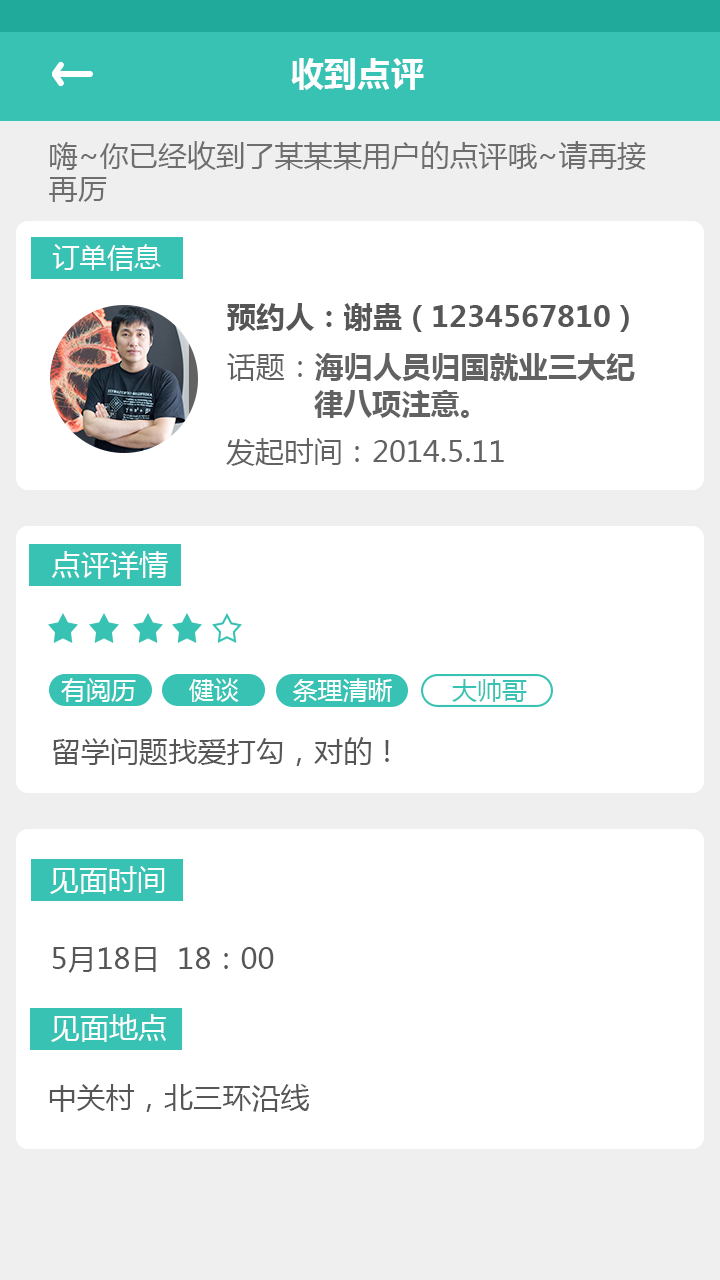
<style>
.page{position:relative;width:720px;height:1280px;background:#ffffff}
.page>*{position:absolute;margin:0}
.t1{font:33.3px "MicrosoftYaHei-Bold";color:#fefefe}
.t2{font:29.2px/33.3px "MicrosoftYaHei";color:#6e6e6e}
.t3{font:27.1px "MicrosoftYaHei";color:#fefefe}
.t4{font:29.2px "MicrosoftYaHei-Bold";color:#565656}
.t5{font:29.2px/37.5px "MicrosoftYaHei-Bold";color:#626262}
.t6{font:29.2px/37.5px "MicrosoftYaHei";color:#626262}
.t7{font:29.2px "MicrosoftYaHei";color:#626262}
.t8{font:29.2px "MicrosoftYaHei";color:#fefefe}
.t9{font:25px "MicrosoftYaHei";color:#ffffff}
.t10{font:25px "MicrosoftYaHei";color:#fefefe}
.t11{font:25px "MicrosoftYaHei";color:#38c2b3}
.t12{font:29.2px "MicrosoftYaHei";color:#565656}
.t13{font:29.2px "MicrosoftYaHei";color:#ffffff}
</style>
<div class="page">
<p class="t1" style="left:291px;top:58px;width:133px;height:32px">收到点评</p>
<p class="t2" style="left:49px;top:141px;width:597px;height:61px">嗨~你已经收到了某某某用户的点评哦~请再接<br>再厉</p>
<p class="t3" style="left:52px;top:244px;width:109px;height:27px">订单信息</p>
<p class="t4" style="left:227px;top:303px;width:402px;height:29px">预约人：谢蛊（1234567810）</p>
<p class="t5" style="left:227px;top:353px;width:408px;height:65px"><span class="t6">话题：</span>海归人员归国就业三大纪<br>          律八项注意。</p>
<p class="t7" style="left:226px;top:438px;width:278px;height:28px">发起时间：2014.5.11</p>
<p class="t8" style="left:52px;top:551px;width:116px;height:28px">点评详情</p>
<p class="t9" style="left:61px;top:678px;width:75px;height:24px">有阅历</p>
<p class="t9" style="left:189px;top:678px;width:50px;height:24px">健谈</p>
<p class="t10" style="left:292px;top:678px;width:100px;height:24px">条理清晰</p>
<p class="t11" style="left:452px;top:679px;width:75px;height:23px">大帅哥</p>
<p class="t12" style="left:53px;top:737px;width:336px;height:29px">留学问题找爱打勾，对的！</p>
<p class="t13" style="left:50px;top:866px;width:115px;height:28px">见面时间</p>
<p class="t12" style="left:53px;top:947px;width:221px;height:26px">5月18日  18：00</p>
<p class="t13" style="left:51px;top:1014px;width:115px;height:28px">见面地点</p>
<p class="t12" style="left:49px;top:1084px;width:261px;height:28px">中关村，北三环沿线</p>
</div>
